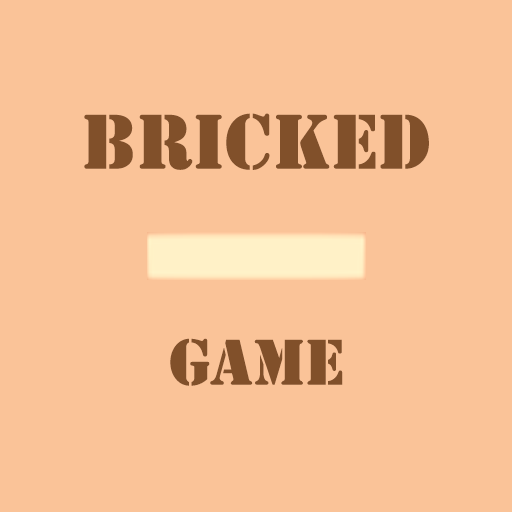
<style>
.page{position:relative;width:512px;height:512px;background:#fac398}
.page>*{position:absolute;margin:0}
.t1{font:72px "StencilStd";color:#81502a}
.t2{font:60px "StencilStd";color:#81502a}
</style>
<div class="page">
<p class="t1" style="left:84px;top:113px;width:345px;height:57px">Bricked</p>
<p class="t2" style="left:170px;top:338px;width:173px;height:48px">Game</p>
</div>
